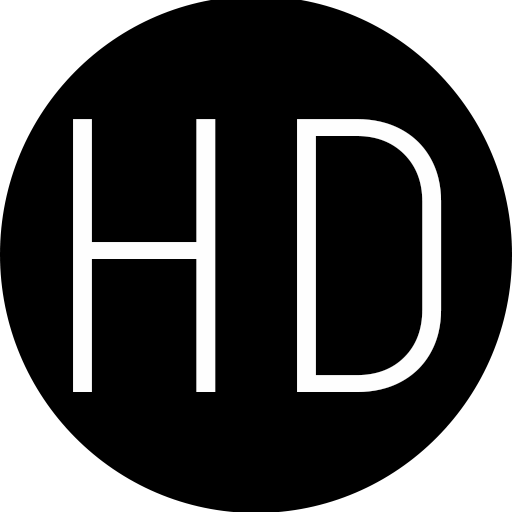
<style>
.page{position:relative;width:512px;height:512px;background:#000000}
.page>*{position:absolute;margin:0}
.t1{font:373.8px "JetBrainsMono-ExtraLight";color:#fefefe}
</style>
<div class="page">
<p class="t1" style="left:73px;top:119px;width:369px;height:273px">HD</p>
</div>
